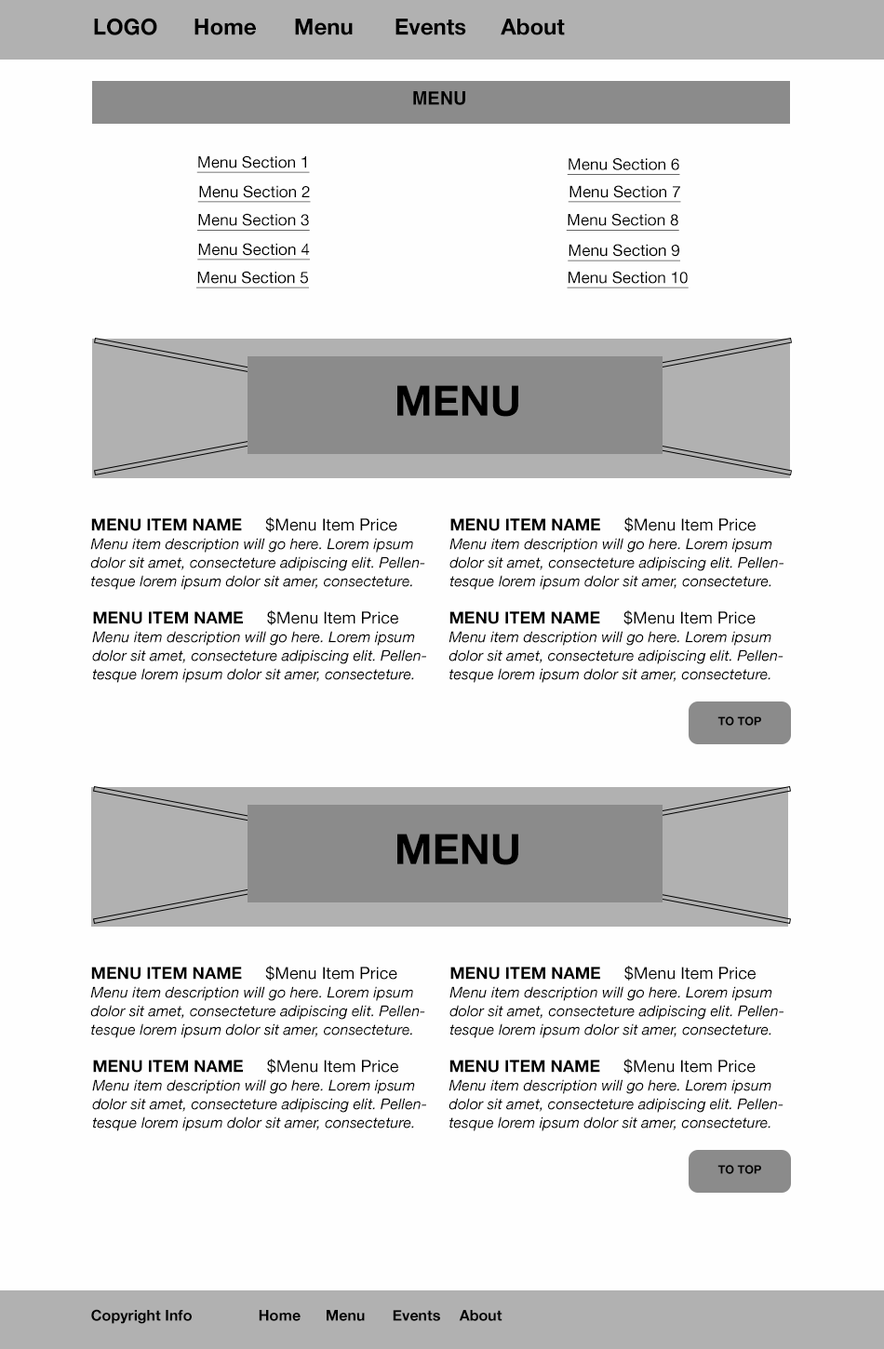
<style>
.page{position:relative;width:884px;height:1349px;background:#fefefe}
.page>*{position:absolute;margin:0}
.t1{font:22.3px "HelveticaNeue-Bold";color:#000000}
.t2{font:18.6px "Helvetica-Bold";color:#000000}
.t3{font:15.9px "HelveticaNeue";color:#000000;text-decoration:underline}
.t4{font:41.9px "HelveticaNeue-Bold";color:#000000}
.t5{font:14.9px/18.6px "HelveticaNeue-Italic";color:#000000}
.t6{font:16.7px/22.3px "HelveticaNeue-Bold";color:#000000}
.t7{font:16.7px/22.3px "HelveticaNeue";color:#000000}
.t8{font:11.6px "HelveticaNeue-Bold";color:#000000}
.t9{font:14.9px "HelveticaNeue-Bold";color:#000000}
</style>
<div class="page">
<p class="t1" style="left:94px;top:18px;width:471px;height:17px">LOGO  Home  Menu  Events  About</p>
<p class="t2" style="left:413px;top:91px;width:52px;height:14px">MENU</p>
<p class="t3" style="left:196px;top:155px;width:114px;height:18px">Menu Section 1</p>
<p class="t3" style="left:567px;top:158px;width:113px;height:17px">Menu Section 6</p>
<p class="t3" style="left:197px;top:185px;width:114px;height:18px">Menu Section 2</p>
<p class="t3" style="left:568px;top:185px;width:113px;height:18px">Menu Section 7</p>
<p class="t3" style="left:197px;top:213px;width:113px;height:18px">Menu Section 3</p>
<p class="t3" style="left:566px;top:213px;width:113px;height:18px">Menu Section 8</p>
<p class="t3" style="left:197px;top:243px;width:113px;height:18px">Menu Section 4</p>
<p class="t3" style="left:568px;top:244px;width:112px;height:17px">Menu Section 9</p>
<p class="t3" style="left:196px;top:271px;width:113px;height:17px">Menu Section 5</p>
<p class="t3" style="left:567px;top:271px;width:121px;height:17px">Menu Section 10</p>
<p class="t4" style="left:397px;top:385px;width:121px;height:32px">MENU</p>
<p class="t5" style="left:90px;top:517px;width:335px;height:73px"><span class="t6">MENU ITEM NAME     </span><span class="t7">$Menu Item Price<br></span>Menu item description will go here. Lorem ipsum dolor sit amet, consecteture adipiscing elit. Pellentesque lorem ipsum dolor sit amer, consecteture.</p>
<p class="t5" style="left:449px;top:517px;width:334px;height:73px"><span class="t6">MENU ITEM NAME     </span><span class="t7">$Menu Item Price<br></span>Menu item description will go here. Lorem ipsum dolor sit amet, consecteture adipiscing elit. Pellentesque lorem ipsum dolor sit amer, consecteture.</p>
<p class="t5" style="left:92px;top:610px;width:334px;height:73px"><span class="t6">MENU ITEM NAME     </span><span class="t7">$Menu Item Price<br></span>Menu item description will go here. Lorem ipsum dolor sit amet, consecteture adipiscing elit. Pellentesque lorem ipsum dolor sit amer, consecteture.</p>
<p class="t5" style="left:448px;top:610px;width:335px;height:73px"><span class="t6">MENU ITEM NAME     </span><span class="t7">$Menu Item Price<br></span>Menu item description will go here. Lorem ipsum dolor sit amet, consecteture adipiscing elit. Pellentesque lorem ipsum dolor sit amer, consecteture.</p>
<p class="t8" style="left:717px;top:716px;width:44px;height:10px">TO TOP</p>
<p class="t4" style="left:397px;top:834px;width:121px;height:31px">MENU</p>
<p class="t5" style="left:90px;top:966px;width:335px;height:72px"><span class="t6">MENU ITEM NAME     </span><span class="t7">$Menu Item Price<br></span>Menu item description will go here. Lorem ipsum dolor sit amet, consecteture adipiscing elit. Pellentesque lorem ipsum dolor sit amer, consecteture.</p>
<p class="t5" style="left:449px;top:966px;width:334px;height:72px"><span class="t6">MENU ITEM NAME     </span><span class="t7">$Menu Item Price<br></span>Menu item description will go here. Lorem ipsum dolor sit amet, consecteture adipiscing elit. Pellentesque lorem ipsum dolor sit amer, consecteture.</p>
<p class="t5" style="left:92px;top:1059px;width:334px;height:72px"><span class="t6">MENU ITEM NAME     </span><span class="t7">$Menu Item Price<br></span>Menu item description will go here. Lorem ipsum dolor sit amet, consecteture adipiscing elit. Pellentesque lorem ipsum dolor sit amer, consecteture.</p>
<p class="t5" style="left:448px;top:1059px;width:335px;height:72px"><span class="t6">MENU ITEM NAME     </span><span class="t7">$Menu Item Price<br></span>Menu item description will go here. Lorem ipsum dolor sit amet, consecteture adipiscing elit. Pellentesque lorem ipsum dolor sit amer, consecteture.</p>
<p class="t8" style="left:717px;top:1165px;width:44px;height:9px">TO TOP</p>
<p class="t9" style="left:91px;top:1309px;width:411px;height:15px">Copyright Info   Home Menu Events About</p>
</div>
